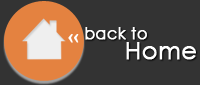
<style>
.page{position:relative;width:200px;height:85px;background:#333333}
.page>*{position:absolute;margin:0}
.t1{font:16px/16px "CenturyGothic";color:#ffffff;font-weight:bold}
.t2{font:24px/16px "CenturyGothic";color:#ffffff;font-weight:bold}
.t3{font:19px "Century";color:#ffffff;font-weight:bold}
</style>
<div class="page">
<p class="t1" style="left:85px;top:27px;width:111px;height:33px">back to <br>       <span class="t2">Home</span></p>
<p class="t3" style="left:68px;top:34px;width:11px;height:9px">‹‹</p>
</div>
